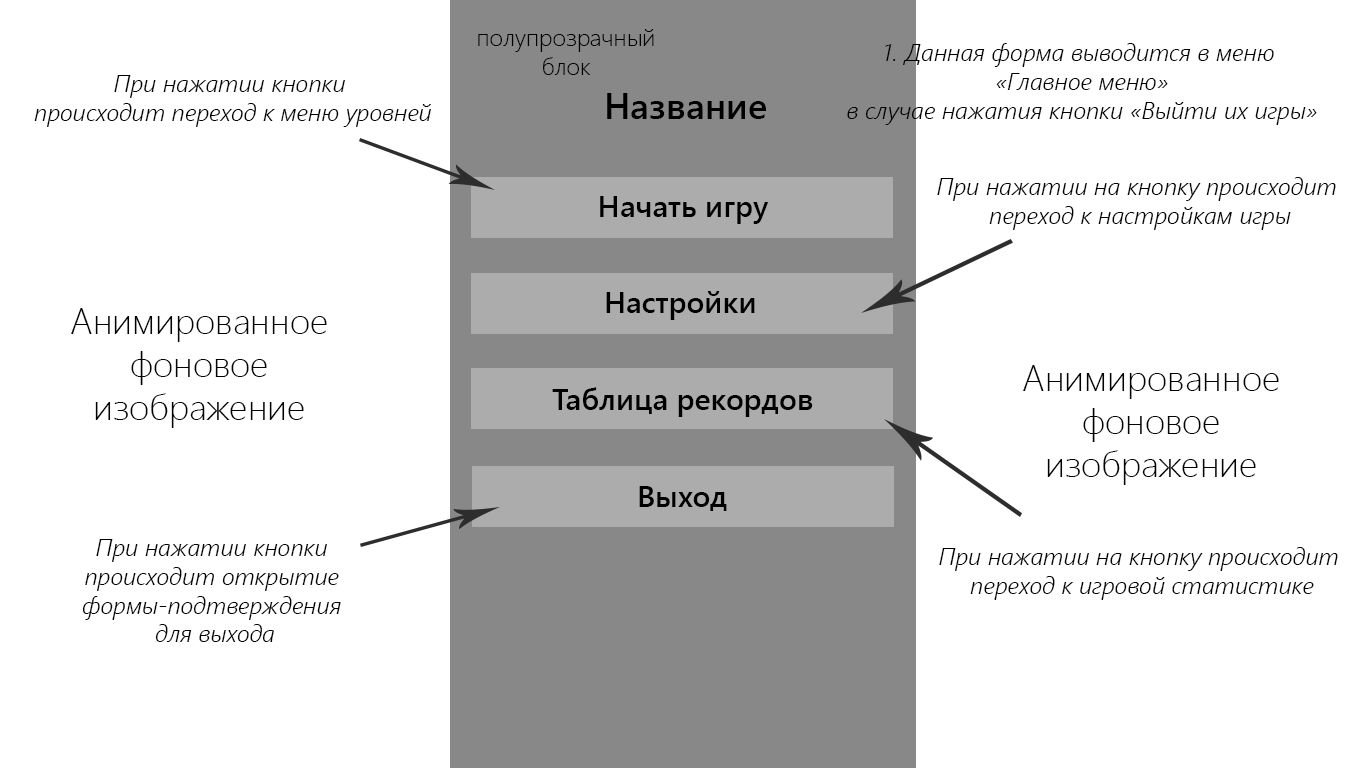
<style>
.page{position:relative;width:1366px;height:768px;background:#ffffff}
.page>*{position:absolute;margin:0}
.t1{font:24px "SegoeUI-Light";color:#000000}
.t2{font:24px "SegoeUI-SemilightItalic";color:#000000}
.t3{font:36px "SegoeUI-Semibold";color:#000000}
.t4{font:30px "SegoeUI-Semibold";color:#000000}
.t5{font:36px "SegoeUI-Light";color:#000000}
</style>
<div class="page">
<p class="t1" style="left:478px;top:29px;width:176px;height:46px;text-align:center">полупрозрачный блок</p>
<p class="t2" style="left:847px;top:43px;width:470px;height:82px;text-align:center">1. Данная форма выводится в меню <br>«Главное меню»<br>в случае нажатия кнопки «Выйти их игры»</p>
<p class="t2" style="left:34px;top:75px;width:397px;height:52px;text-align:center">При нажатии кнопки <br>происходит переход к меню уровней</p>
<p class="t3" style="left:607px;top:93px;width:159px;height:26px">Название</p>
<p class="t2" style="left:937px;top:177px;width:399px;height:53px;text-align:center">При нажатии на кнопку происходит <br>переход к настройкам игры</p>
<p class="t4" style="left:600px;top:196px;width:169px;height:28px">Начать игру</p>
<p class="t4" style="left:606px;top:291px;width:149px;height:29px">Настройки</p>
<p class="t5" style="left:71px;top:308px;width:256px;height:120px;text-align:center">Анимированное <br>фоновое <br>изображение</p>
<p class="t5" style="left:1023px;top:365px;width:256px;height:120px;text-align:center">Анимированное <br>фоновое <br>изображение</p>
<p class="t4" style="left:552px;top:387px;width:261px;height:30px">Таблица рекордов</p>
<p class="t4" style="left:639px;top:486px;width:88px;height:25px">Выход</p>
<p class="t2" style="left:82px;top:539px;width:259px;height:103px;text-align:center">При нажатии кнопки <br>происходит открытие <br>формы-подтверждения <br>для выхода</p>
<p class="t2" style="left:939px;top:547px;width:399px;height:53px;text-align:center">При нажатии на кнопку происходит <br>переход к игровой статистике</p>
</div>
